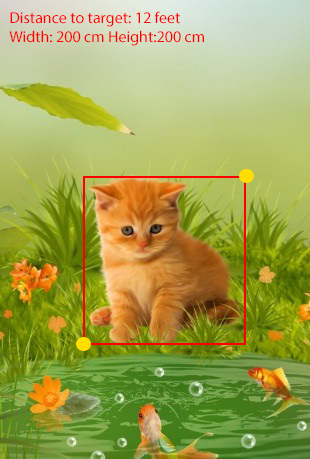
<style>
.page{position:relative;width:310px;height:459px}
.page>*{position:absolute;margin:0}
.t1{font:12px "MyriadPro-Regular";color:#ff0000}
</style>
<div class="page">
<p class="t1" style="left:9px;top:11px;width:195px;height:35px">Distance to target: 12 feet<br>Width: 200 cm Height:200 cm</p>
</div>
